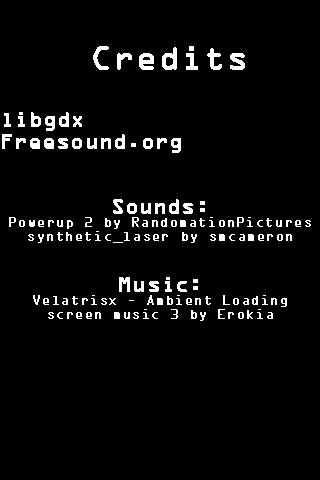
<style>
.page{position:relative;width:320px;height:480px;background:#000000}
.page>*{position:absolute;margin:0}
.t1{font:12px "OCRAStd";color:#ffffff;font-weight:bold}
.t2{font:30px "OCRAStd";color:#ffffff;font-weight:bold}
.t3{font:18px "OCRAStd";color:#ffffff;font-weight:bold}
</style>
<div class="page">
<p class="t1" style="left:2px;top:46px;width:309px;height:275px"><span class="t2">    <br>    Credits<br> <br></span><span class="t3">libgdx<br>Freesound.org<br><br><br>Sounds:<br></span>Powerup 2 by RandomationPictures<br>synthetic_laser by smcameron<br><br><br><span class="t3">Music:<br></span>Velatrisx - Ambient Loading screen music 3 by Erokia</p>
</div>
